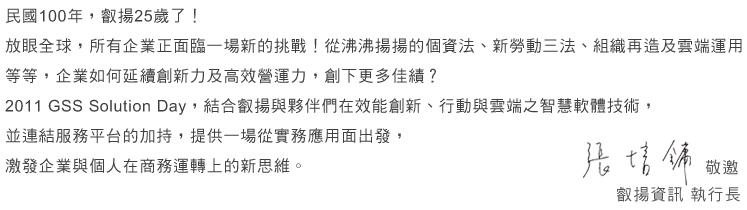
<style>
.page{position:relative;width:747px;height:210px;background:#ffffff}
.page>*{position:absolute;margin:0}
.t1{font:16px/30px "DFHei-Md-HKP-BF";letter-spacing:0.05em;color:#3f3f3f}
</style>
<div class="page">
<p class="t1" style="left:5px;top:8px;width:737px;height:166px">民國100年，叡揚25歲了！<br>放眼全球，所有企業正面臨一場新的挑戰！從沸沸揚揚的個資法、新勞動三法、組織再造及雲端運用等等，企業如何延續創新力及高效營運力，創下更多佳績？<br>2011 GSS Solution Day，結合叡揚與夥伴們在效能創新、行動與雲端之智慧軟體技術，<br>並連結服務平台的加持，提供一場從實務應用面出發，<br>激發企業與個人在商務運轉上的新思維。</p>
</div>
